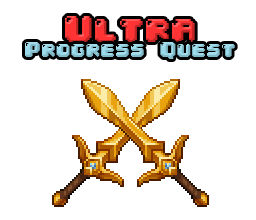
<style>
.page{position:relative;width:256px;height:220px;background:#ffffff}
.page>*{position:absolute;margin:0}
.t1{font:32px "04b30"}
.t2{font:18px "04b30";color:#99d9ea}
</style>
<div class="page">
<p class="t1" style="left:65px;top:16px;width:130px;height:26px">Ultra</p>
<p class="t2" style="left:25px;top:42px;width:210px;height:17px">Progress Quest</p>
</div>
